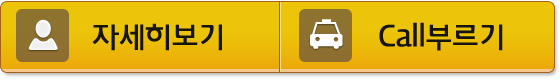
<style>
.page{position:relative;width:560px;height:80px;background:#ecc409}
.page>*{position:absolute;margin:0}
.t1{font:28px "Daum_Regular";letter-spacing:-0.025em;color:#17150f;scale:0.97 1}
</style>
<div class="page">
<p class="t1" style="left:92px;top:23px;width:130px;height:28px">자세히보기</p>
<p class="t1" style="left:379px;top:22px;width:124px;height:29px">Call부르기</p>
</div>
